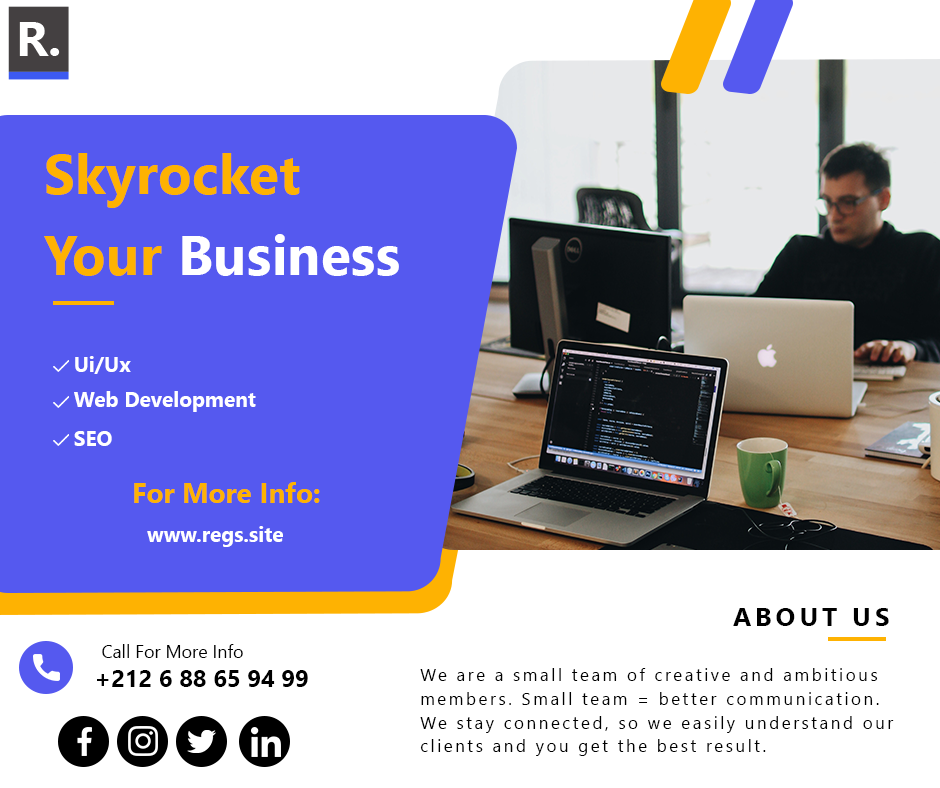
<style>
.page{position:relative;width:940px;height:788px;background:#ffffff}
.page>*{position:absolute;margin:0}
.t1{font:55.3px/80.7px "SegoeUI-Bold";letter-spacing:0.003em;color:#feb202}
.t2{font:55.3px/80.7px "SegoeUI-Bold";letter-spacing:0.003em;color:#ffffff}
.t3{font:20.8px "SegoeUI-Bold";letter-spacing:0.003em;color:#ffffff}
.t4{font:27.7px "SegoeUI-Bold";letter-spacing:0.003em;color:#feb202}
.t5{font:26.3px "SegoeUI-Bold";letter-spacing:0.143em;color:#000000}
.t6{font:17.8px "SegoeUI";letter-spacing:0.003em;color:#000000}
.t7{font:23.7px "SegoeUI-Bold";letter-spacing:0.003em;color:#000000}
.t8{font:17.2px/23.8px "SegoeUI";letter-spacing:0.143em;color:#000000}
</style>
<div class="page">
<p class="t1" style="left:44px;top:153px;width:355px;height:123px;text-align:right">Skyrocket<br>Your <span class="t2">Business</span></p>
<p class="t3" style="left:75px;top:356px;width:56px;height:18px">Ui/Ux</p>
<p class="t3" style="left:74px;top:391px;width:182px;height:21px">Web Development</p>
<p class="t3" style="left:74px;top:431px;width:38px;height:15px">SEO</p>
<p class="t4" style="left:134px;top:482px;width:186px;height:21px">For More Info:</p>
<p class="t3" style="left:147px;top:526px;width:136px;height:21px">www.regs.site</p>
<p class="t5" style="left:733px;top:608px;width:156px;height:18px">ABOUT US</p>
<p class="t6" style="left:102px;top:644px;width:141px;height:14px">Call For More Info</p>
<p class="t7" style="left:97px;top:670px;width:211px;height:17px">+212 6 88 65 94 99</p>
<p class="t8" style="left:420px;top:668px;width:474px;height:88px;text-align:right">We are a small team of creative and ambitious members. Small team = better communication. We stay connected, so we easily understand our clients and you get the best result.</p>
</div>
